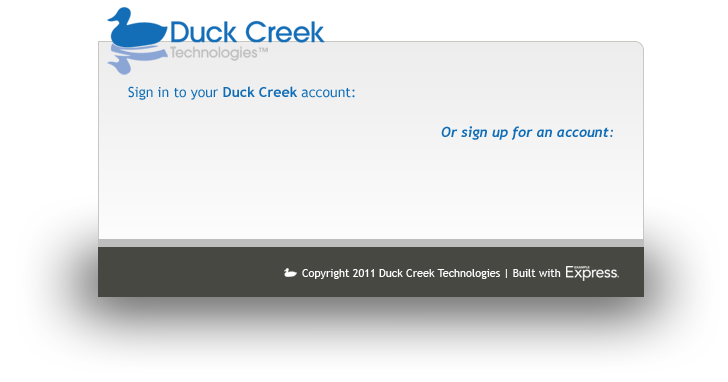
<style>
.page{position:relative;width:728px;height:382px;background:#ffffff}
.page>*{position:absolute;margin:0}
.t1{font:14px "TrebuchetMS";color:#0f6db7}
.t2{font:14px "TrebuchetMS-Bold";color:#0f6db7}
.t3{font:14px "Trebuchet-BoldItalic";color:#0f6db7}
.t4{font:11px "TrebuchetMS";color:#ffffff}
</style>
<div class="page">
<p class="t1" style="left:128px;top:86px;width:227px;height:14px">Sign in to your <span class="t2">Duck Creek</span> account:</p>
<p class="t3" style="left:441px;top:126px;width:172px;height:14px">Or sign up for an account:</p>
<p class="t4" style="left:302px;top:269px;width:259px;height:10px">Copyright 2011 Duck Creek Technologies | Built with</p>
</div>
